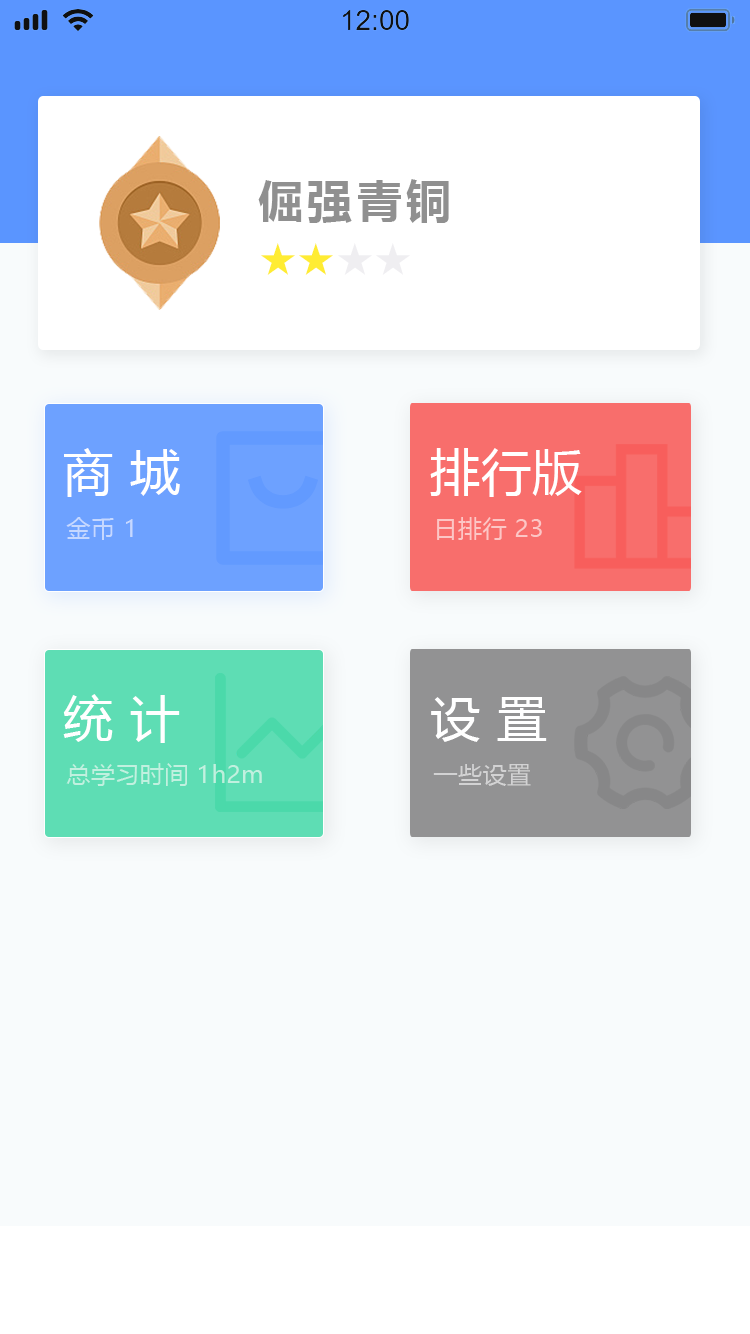
<style>
.page{position:relative;width:750px;height:1334px;background:#f8fbfc}
.page>*{position:absolute;margin:0}
.t1{font:45px "MicrosoftYaHei-Bold";letter-spacing:0.1em;color:#909090}
.t2{font:37.4px "AdobeHeitiStd-Regular";letter-spacing:0.02em;color:#ffec33}
.t3{font:37.4px "AdobeHeitiStd-Regular";letter-spacing:0.02em;color:#efeef1}
.t4{font:50px "MicrosoftYaHei";letter-spacing:0.02em;color:#ffffff}
.t5{font:24px "MicrosoftYaHei";letter-spacing:0.02em;color:#c6d8ff}
.t6{font:24px "MicrosoftYaHei";letter-spacing:0.02em;color:#fcc6c5}
.t7{font:24px "MicrosoftYaHei";letter-spacing:0.02em;color:#c1f0df}
.t8{font:24px "MicrosoftYaHei";letter-spacing:0.02em;color:#d2d2d3}
</style>
<div class="page">
<p class="t1" style="left:258px;top:179px;width:191px;height:44px">倔强青铜</p>
<p class="t2" style="left:261px;top:243px;width:149px;height:32px">★★<span class="t3">★★</span></p>
<p class="t4" style="left:64px;top:448px;width:116px;height:49px">商 城</p>
<p class="t4" style="left:430px;top:448px;width:152px;height:49px">排行版</p>
<p class="t5" style="left:66px;top:517px;width:67px;height:23px">金币 1</p>
<p class="t6" style="left:437px;top:517px;width:105px;height:23px">日排行 23</p>
<p class="t4" style="left:63px;top:694px;width:117px;height:49px">统 计</p>
<p class="t4" style="left:431px;top:697px;width:116px;height:45px">设 置</p>
<p class="t7" style="left:66px;top:763px;width:196px;height:23px">总学习时间 1h2m</p>
<p class="t8" style="left:433px;top:764px;width:98px;height:22px">一些设置</p>
</div>
